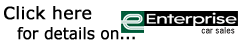
<style>
.page{position:relative;width:240px;height:45px;background:#ffffff}
.page>*{position:absolute;margin:0}
.t1{font:17px "Verdana";color:#000000;font-weight:bold}
.t2{font:16px "Verdana";color:#000000;font-weight:bold;scale:0.91 1}
</style>
<div class="page">
<p class="t1" style="left:4px;top:6px;width:88px;height:14px">Click here</p>
<p class="t2" style="left:17px;top:27px;width:118px;height:13px">for details on...</p>
</div>
